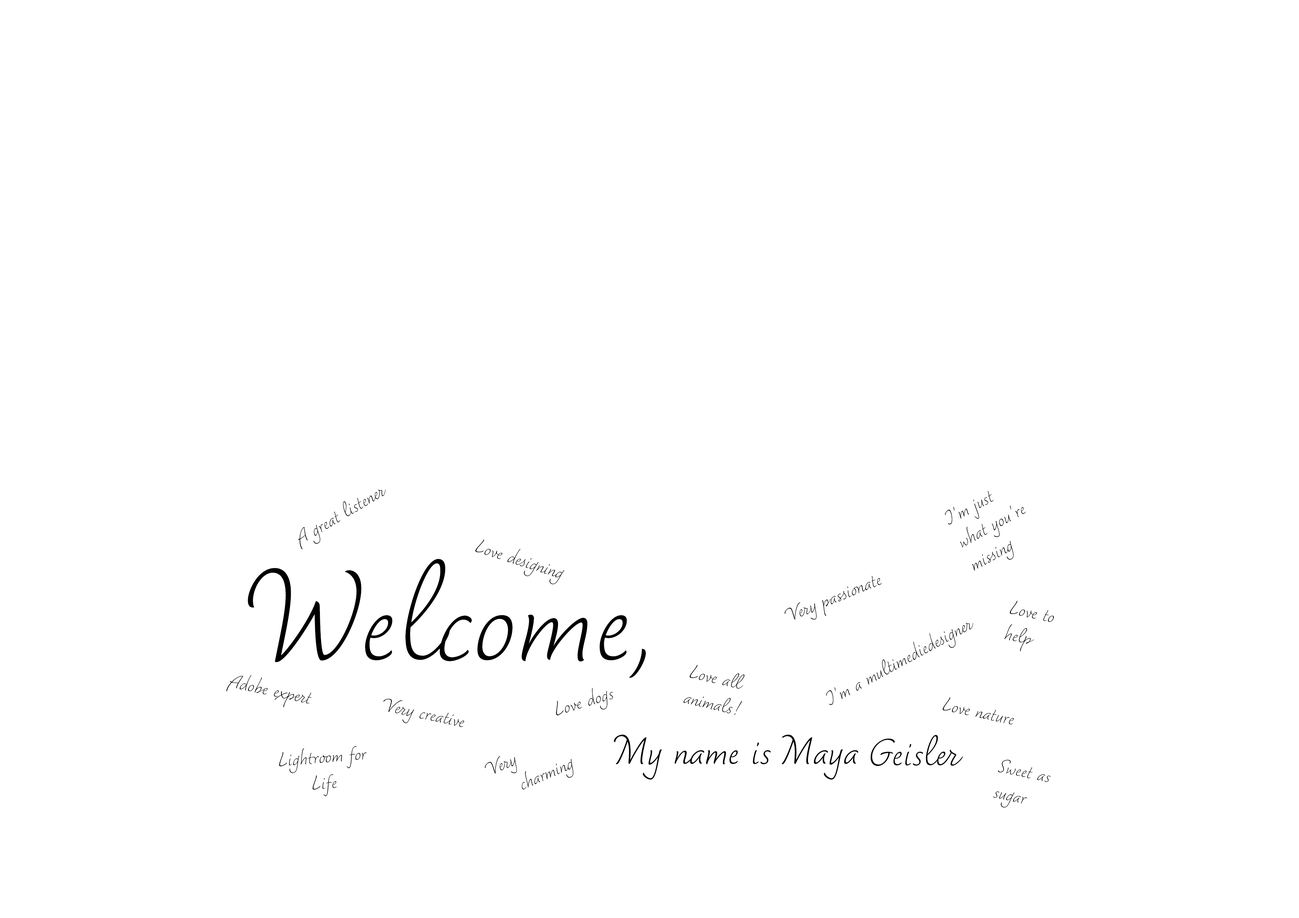
<style>
.page{position:relative;width:1299px;height:918px;background:#ffffff}
.page>*{position:absolute;margin:0}
.t1{font:23.1px "Dolce-Thin";color:#000000}
.t2{font:23.1px/26.1px "Dolce-Thin";color:#000000}
.t3{font:154.3px "Dolce-Thin";color:#000000}
.t4{font:46.3px "Dolce-Thin";color:#000000}
</style>
<div class="page">
<p class="t1" style="left:298px;top:489px;width:87px;height:60px;rotate:-31deg">A great listener</p>
<p class="t2" style="left:945px;top:491px;width:81px;height:80px;rotate:-29deg">I’m just <br>what you’re<br>missing</p>
<p class="t1" style="left:475px;top:539px;width:89px;height:46px;rotate:18deg">Love designing</p>
<p class="t3" style="left:248px;top:559px;width:398px;height:119px">Welcome,</p>
<p class="t1" style="left:784px;top:576px;width:97px;height:44px;rotate:-22deg">Very passionate</p>
<p class="t2" style="left:1004px;top:600px;width:50px;height:52px;rotate:12deg">Love to <br>help</p>
<p class="t1" style="left:826px;top:623px;width:147px;height:82px;rotate:-29deg">I’m a multimediedesigner</p>
<p class="t2" style="left:683px;top:665px;width:62px;height:50px;rotate:13deg">Love all <br>animals!</p>
<p class="t1" style="left:226px;top:675px;width:86px;height:32px;rotate:12deg">Adobe expert</p>
<p class="t1" style="left:556px;top:688px;width:57px;height:28px;rotate:-17deg">Love dogs</p>
<p class="t1" style="left:383px;top:699px;width:81px;height:28px;rotate:12deg">Very creative</p>
<p class="t1" style="left:942px;top:697px;width:72px;height:28px;rotate:12deg">Love nature</p>
<p class="t4" style="left:870px;top:735px;width:93px;height:31px">Geisler</p>
<p class="t2" style="left:279px;top:746px;width:88px;height:50px;text-align:center;rotate:-5deg">Lightroom for<br>Life</p>
<p class="t2" style="left:485px;top:756px;width:88px;height:34px;rotate:-23deg">Very<br>    charming</p>
<p class="t2" style="left:993px;top:760px;width:57px;height:48px;rotate:12deg">Sweet as<br>sugar</p>
</div>
